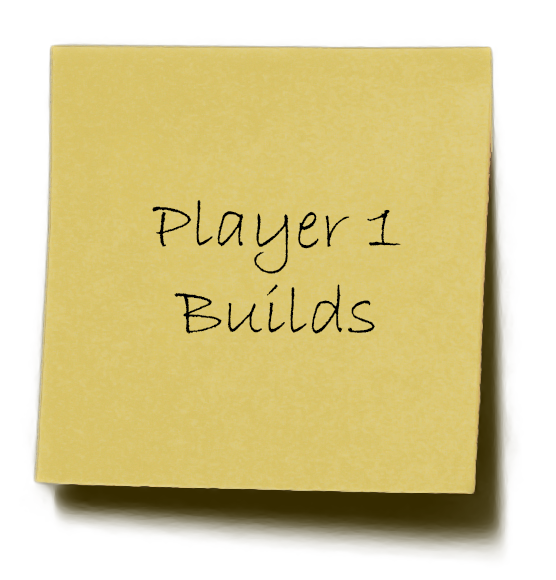
<style>
.page{position:relative;width:556px;height:580px;background:#ffffff}
.page>*{position:absolute;margin:0}
.t1{font:72px "BradleyHandITC";color:#000000}
</style>
<div class="page">
<p class="t1" style="left:152px;top:200px;width:249px;height:134px;text-align:center">Player 1<br>Builds</p>
</div>
